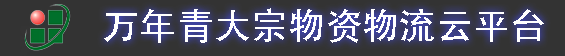
<style>
.page{position:relative;width:565px;height:56px;background:#333333}
.page>*{position:absolute;margin:0}
.t1{font:37px "AdobeHeitiStd-Regular";color:#ffffff}
</style>
<div class="page">
<p class="t1" style="left:104px;top:8px;width:440px;height:35px">万年青大宗物资物流云平台</p>
</div>
